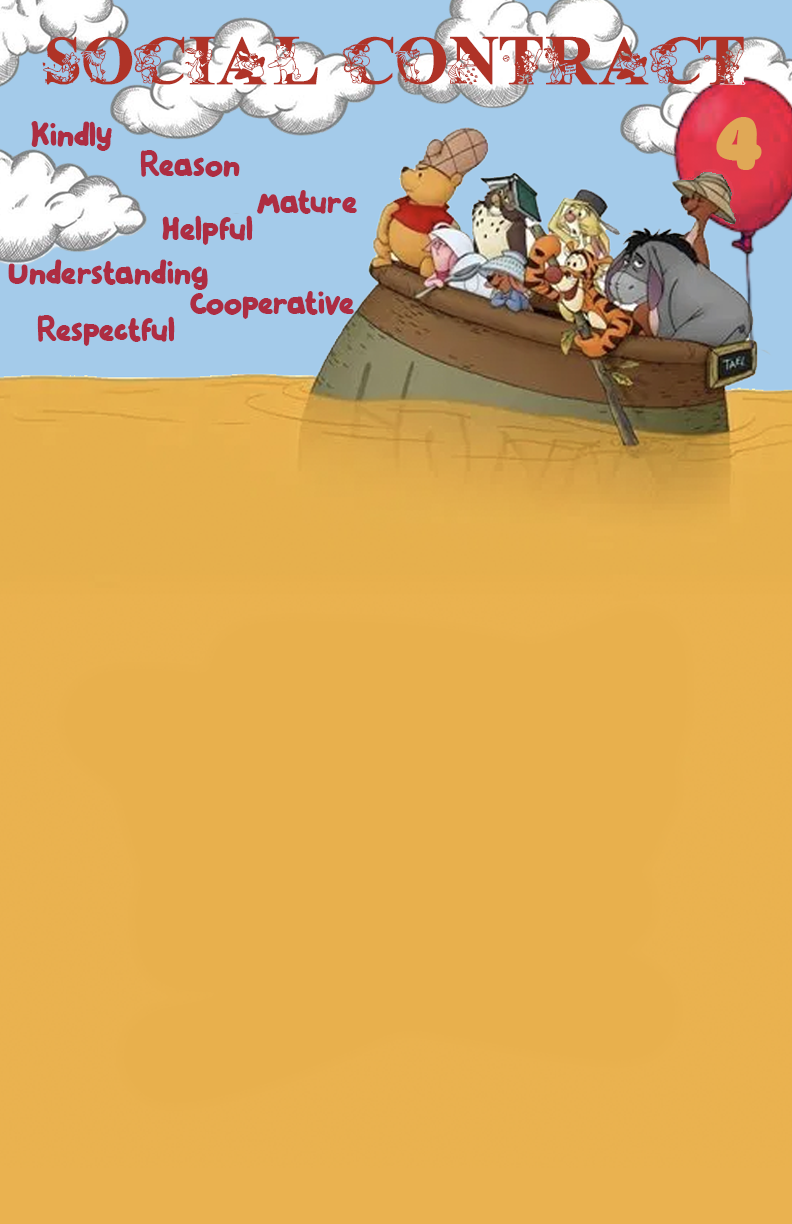
<style>
.page{position:relative;width:792px;height:1224px;background:#e8b04d}
.page>*{position:absolute;margin:0}
.t1{font:47.3px "LMSLetsPretendwithFriends";color:#af3327}
.t2{font:34.5px "WinniePERSONALUSE";color:#ad2d42}
.t3{font:68.7px "ChurchwardMarianna-Regular";color:#e0a856}
.t4{font:33.9px "WinniePERSONALUSE";color:#ad2d42}
</style>
<div class="page">
<p class="t1" style="left:42px;top:36px;width:702px;height:49px">Social Contract</p>
<p class="t2" style="left:31px;top:121px;width:81px;height:30px">Kindly</p>
<p class="t3" style="left:716px;top:117px;width:46px;height:53px">4</p>
<p class="t2" style="left:140px;top:150px;width:100px;height:27px">Reason</p>
<p class="t2" style="left:257px;top:190px;width:100px;height:24px">Mature</p>
<p class="t2" style="left:162px;top:215px;width:91px;height:30px">Helpful</p>
<p class="t2" style="left:8px;top:259px;width:200px;height:31px">Understanding</p>
<p class="t4" style="left:190px;top:291px;width:164px;height:28px">Cooperative</p>
<p class="t2" style="left:37px;top:315px;width:138px;height:31px">Respectful</p>
</div>
